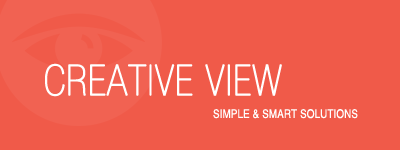
<style>
.page{position:relative;width:400px;height:150px;background:#f05a49}
.page>*{position:absolute;margin:0}
.t1{font:42px "HelveticaNeue-UltraLigCond";letter-spacing:0.01em;color:#ffffff;text-transform:uppercase;font-weight:bold}
.t2{font:12px "Helvetica-Narrow";letter-spacing:0.01em;color:#ffffff;text-transform:uppercase}
</style>
<div class="page">
<p class="t1" style="left:45px;top:63px;width:237px;height:34px">Creative View</p>
<p class="t2" style="left:213px;top:109px;width:145px;height:10px">SIMPLE &amp; SMART SOLUTIONS</p>
</div>
